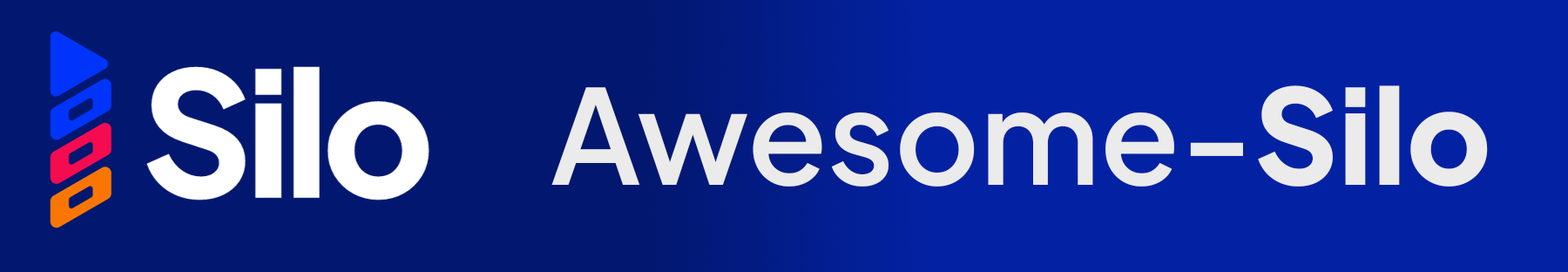
<style>
.page{position:relative;width:1568px;height:272px;background:#0322a3}
.page>*{position:absolute;margin:0}
.t1{font:130.7px "PlusJakartaSans-SemiBold";color:#ebebeb}
.t2{font:130.7px "PlusJakartaSans-ExtraBold";color:#ebebeb}
</style>
<div class="page">
<p class="t1" style="left:551px;top:85px;width:938px;height:102px">Awesome-<span class="t2">Silo</span></p>
</div>
